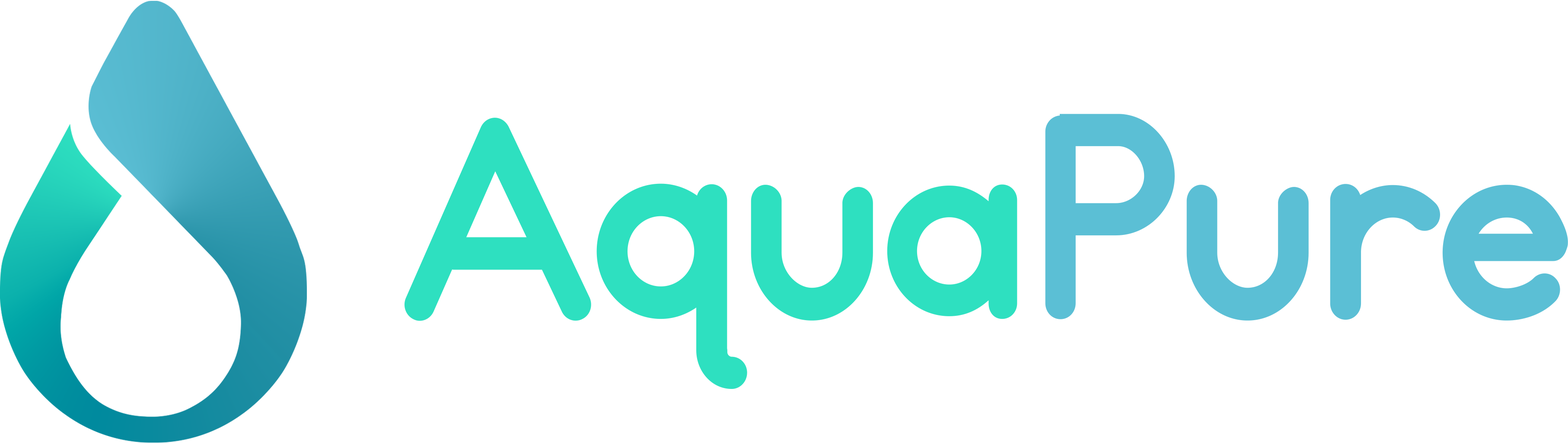
<style>
.page{position:relative;width:1568px;height:443px;background:#ffffff}
.page>*{position:absolute;margin:0}
.t1{font:270.1px "Somatic-Rounded";color:#2ee0c0;scale:0.95 1}
.t2{font:270.1px "Somatic-Rounded";color:#5bbfd5;scale:0.95 1}
</style>
<div class="page">
<p class="t1" style="left:404px;top:114px;width:1164px;height:275px">Aqua<span class="t2">Pure</span></p>
</div>
